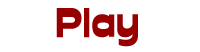
<style>
.page{position:relative;width:200px;height:52px;background:#ffffff}
.page>*{position:absolute;margin:0}
.t1{font:40px "Glockenspiel";color:#970000}
</style>
<div class="page">
<p class="t1" style="left:56px;top:8px;width:82px;height:39px">Play</p>
</div>
